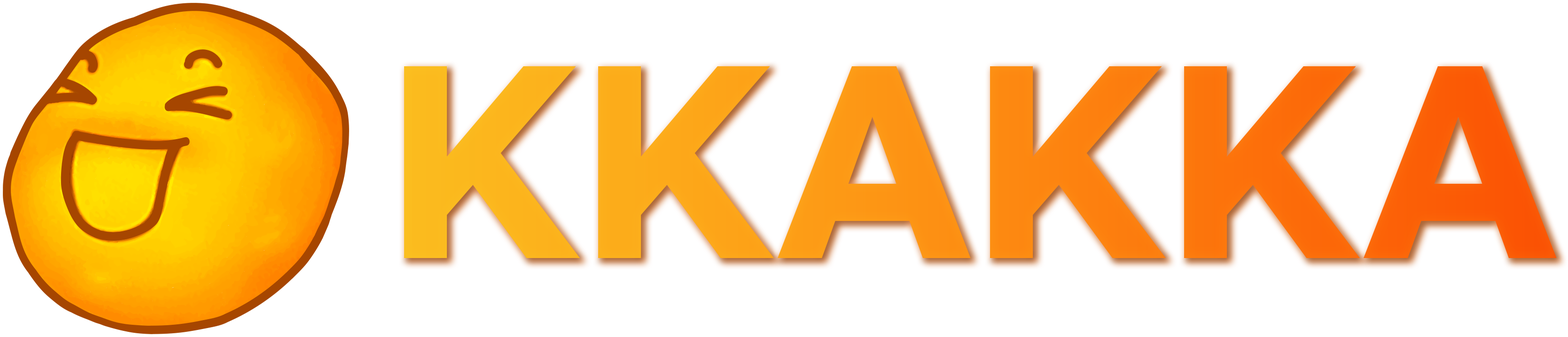
<style>
.page{position:relative;width:1568px;height:337px;background:#ffffff}
.page>*{position:absolute;margin:0}
.t1{font:234.9px "GmarketSansTTFBold"}
</style>
<div class="page">
<p class="t1" style="left:404px;top:66px;width:1153px;height:192px">KKAKKA</p>
</div>
